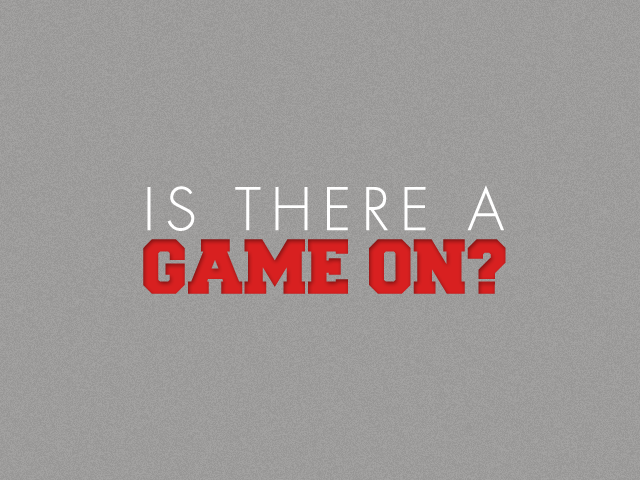
<style>
.page{position:relative;width:640px;height:480px}
.page>*{position:absolute;margin:0}
.t1{font:57.3px "FuturaLT-Light";letter-spacing:0.18em;color:#ffffff}
.t2{font:65.4px "Freshman";letter-spacing:-0.01em;color:#d82020}
</style>
<div class="page">
<p class="t1" style="left:147px;top:185px;width:357px;height:46px">IS THERE A</p>
<p class="t2" style="left:143px;top:239px;width:363px;height:55px">GAME ON?</p>
</div>
